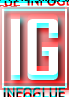
<style>
.page{position:relative;width:69px;height:97px;background:#ffffff}
.page>*{position:absolute;margin:0}
.t1{font:80px "AgencyFB-Bold";color:#ffffff}
.t2{font:14px "TrebuchetMS"}
</style>
<div class="page">
<p class="t1" style="left:10px;top:12px;width:48px;height:61px">IG</p>
<p class="t2" style="left:3px;top:85px;width:62px;height:11px">INFOGLUE</p>
</div>
